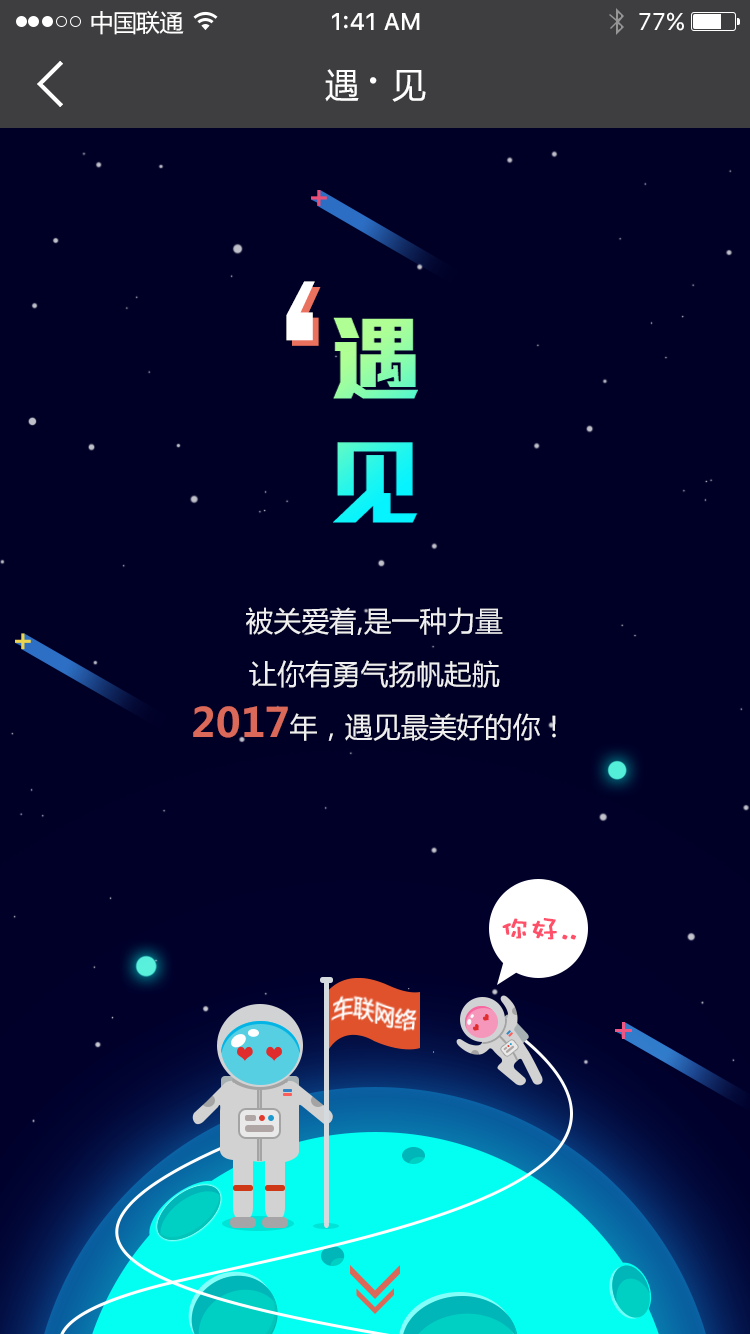
<style>
.page{position:relative;width:750px;height:1334px;background:#000026}
.page>*{position:absolute;margin:0}
.t1{font:24px "MicrosoftYaHei";letter-spacing:-0.025em;color:#ffffff}
.t2{font:24px "SFUIText-Medium";color:#ffffff}
.t3{font:24px "SFUIText-Regular";color:#ffffff}
.t4{font:34px "MicrosoftYaHei";letter-spacing:-0.025em;color:#ffffff}
.t5{font:50px "MicrosoftYaHei";letter-spacing:-0.025em;color:#ffffff}
.t6{font:240px "WenQuanYiZenHei";letter-spacing:-0.04em;color:#ffffff}
.t7{font:240px "WenQuanYiZenHei";letter-spacing:-0.04em}
.t8{font:28px "MicrosoftYaHei";color:#ffffff}
.t9{font:40px "MicrosoftYaHei-Bold";color:#ea715e}
.t10{font:30px "DFPWaWaW5";color:#ff4f69;font-weight:bold}
</style>
<div class="page">
<p class="t1" style="left:91px;top:11px;width:93px;height:24px">中国联通</p>
<p class="t2" style="left:332px;top:13px;width:88px;height:17px">1:41 AM</p>
<p class="t3" style="left:639px;top:12px;width:45px;height:19px">77%</p>
<p class="t4" style="left:325px;top:69px;width:101px;height:33px">遇 <span class="t5">· </span>见</p>
<p class="t6" style="left:286px;top:281px;width:29px;height:60px;rotate:180deg">，</p>
<p class="t7" style="left:292px;top:287px;width:29px;height:59px;rotate:180deg">，</p>
<p class="t8" style="left:246px;top:607px;width:257px;height:28px;opacity:0.9">被关爱着,是一种力量</p>
<p class="t8" style="left:249px;top:660px;width:251px;height:28px;opacity:0.9">让你有勇气扬帆起航</p>
<p class="t8" style="left:193px;top:706px;width:363px;height:35px;opacity:0.9"><span class="t9">2017</span>年，遇见最美好的你！</p>
<p class="t10" style="left:502px;top:918px;width:74px;height:22px">你好..</p>
</div>
